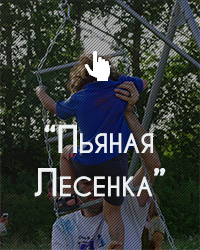
<style>
.page{position:relative;width:200px;height:250px}
.page>*{position:absolute;margin:0}
.t1{font:36px "CaviarDreams-Bold";color:#ecf0f1;font-variant:small-caps}
</style>
<div class="page">
<p class="t1" style="left:34px;top:124px;width:132px;height:73px;text-align:center">“Пьяная<br>Лесенка”</p>
</div>
